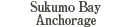
<style>
.page{position:relative;width:132px;height:27px;background:#ffffff}
.page>*{position:absolute;margin:0}
.t1{font:14px/13px "RyuminPro-ExBold";letter-spacing:-0.04em;color:#4c4843;scale:0.9 1}
</style>
<div class="page">
<p class="t1" style="left:30px;top:1px;width:71px;height:26px;text-align:center">Sukumo Bay<br>Anchorage</p>
</div>
